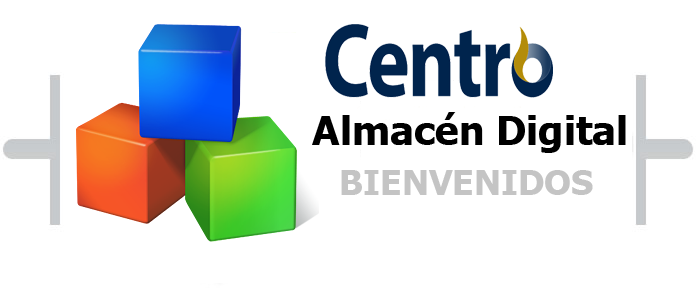
<style>
.page{position:relative;width:700px;height:300px;background:#ffffff}
.page>*{position:absolute;margin:0}
.t1{font:40px "Tahoma-Bold";color:#000000}
.t2{font:35px "Tahoma-Bold";color:#c4c4c4}
</style>
<div class="page">
<p class="t1" style="left:312px;top:112px;width:314px;height:41px">Almacén Digital</p>
<p class="t2" style="left:341px;top:170px;width:252px;height:25px">BIENVENIDOS</p>
</div>
